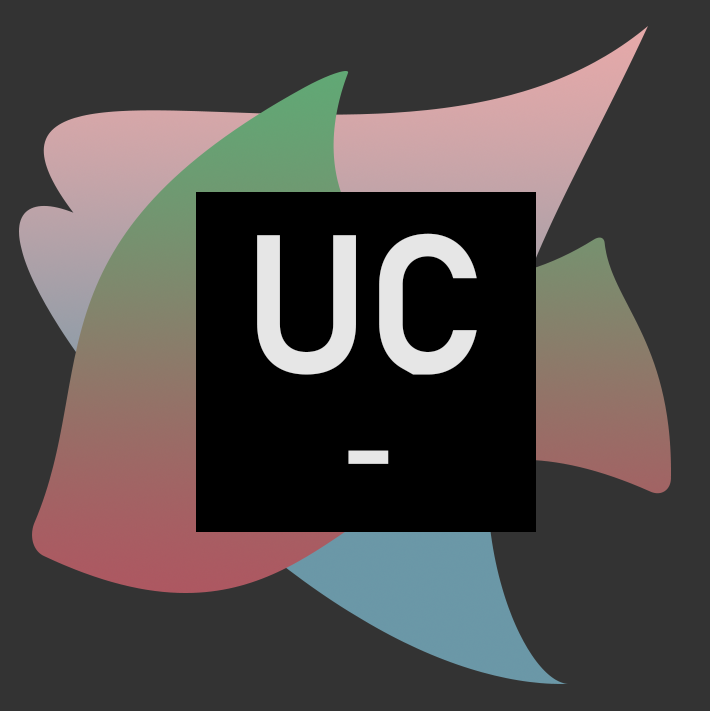
<style>
.page{position:relative;width:710px;height:711px;background:#333333}
.page>*{position:absolute;margin:0}
.t1{font:194.4px "Bahnschrift-SemiBold";color:#e6e6e6}
.t2{font:116.7px "Bahnschrift-SemiBold";color:#e6e6e6}
</style>
<div class="page">
<p class="t1" style="left:257px;top:233px;width:220px;height:142px">UC</p>
<p class="t2" style="left:348px;top:450px;width:41px;height:14px">-</p>
</div>
